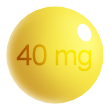
<style>
.page{position:relative;width:110px;height:110px;background:#ffffff}
.page>*{position:absolute;margin:0}
.t1{font:29.3px "ArialMT";letter-spacing:-0.04em}
</style>
<div class="page">
<p class="t1" style="left:16px;top:44px;width:76px;height:28px">40 mg</p>
</div>
